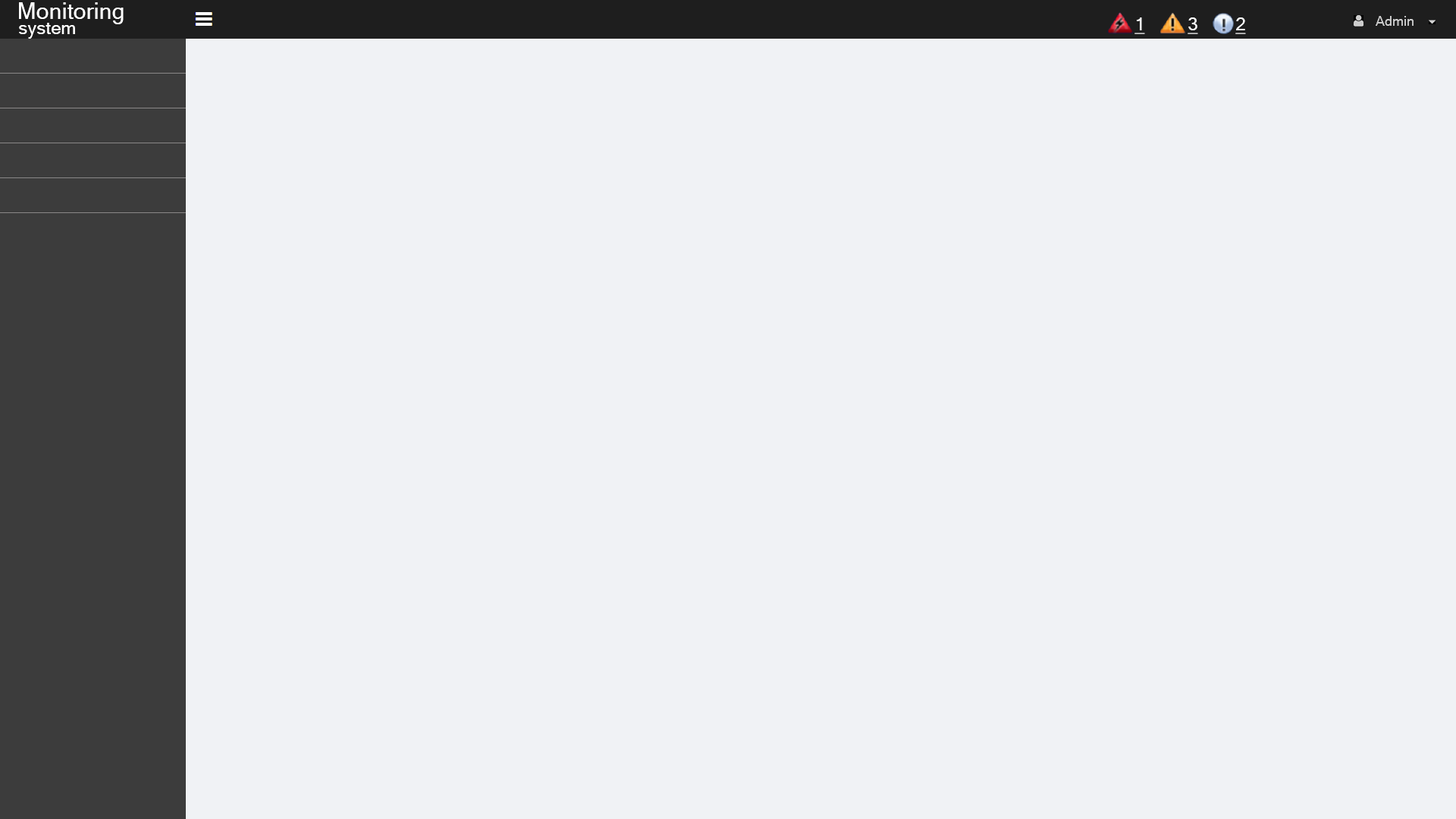
<style>
.page{position:relative;width:1456px;height:819px;background:#f0f2f5}
.page>*{position:absolute;margin:0}
.t1{font:22.7px "MicrosoftSansSerif";color:#ffffff}
.t2{font:18.2px "MicrosoftSansSerif";color:#ffffff;text-decoration:underline}
.t3{font:13.6px "MicrosoftSansSerif";color:#cccccc}
.t4{font:18.2px "MicrosoftSansSerif";color:#ffffff}
</style>
<div class="page">
<p class="t1" style="left:19px;top:2px;width:105px;height:22px">Monitoring</p>
<p class="t2" style="left:1134px;top:17px;width:11px;height:17px">1</p>
<p class="t2" style="left:1188px;top:17px;width:10px;height:17px">3</p>
<p class="t2" style="left:1235px;top:17px;width:11px;height:17px">2</p>
<p class="t3" style="left:1376px;top:16px;width:38px;height:10px">Admin</p>
<p class="t4" style="left:19px;top:23px;width:56px;height:16px">system</p>
</div>
